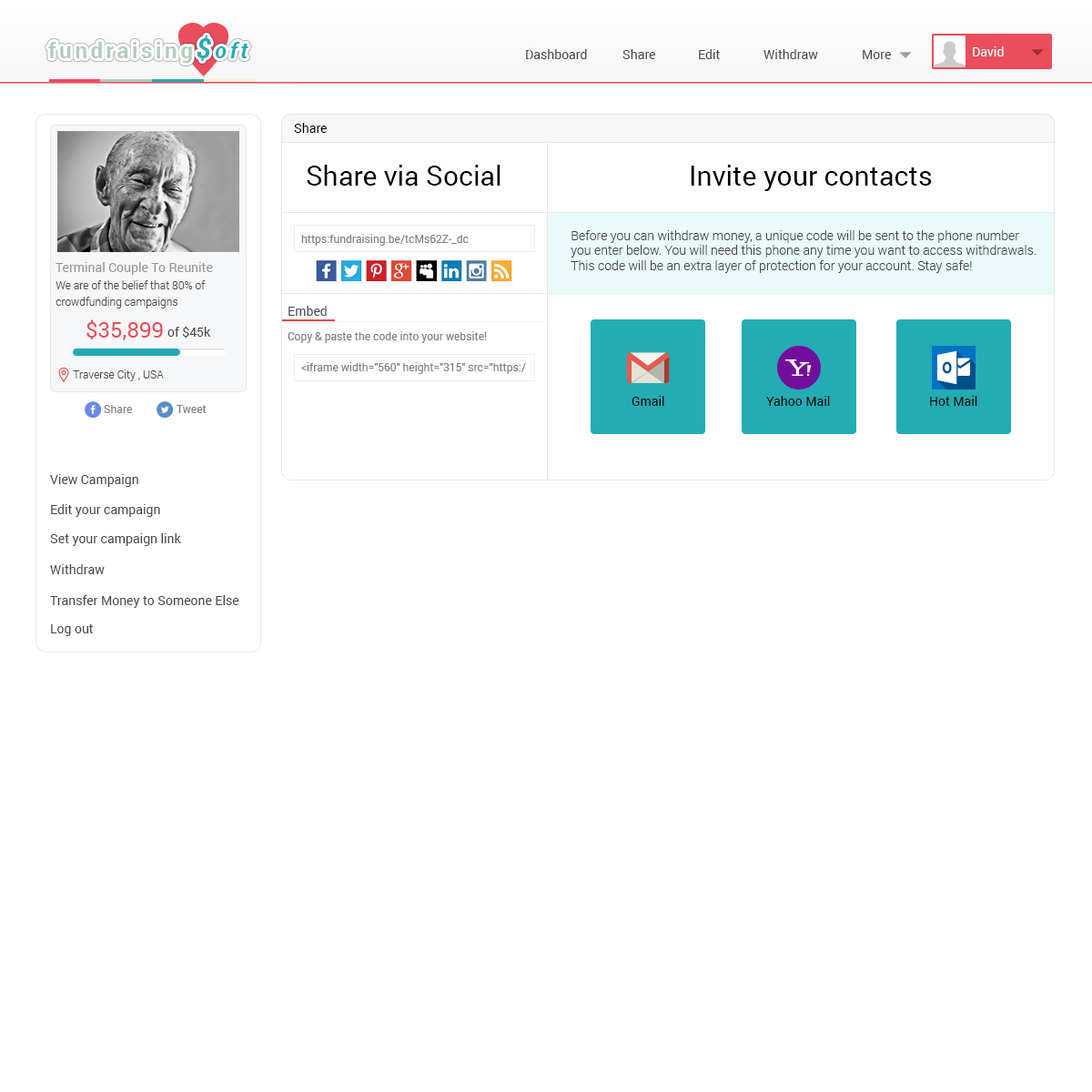
<style>
.page{position:relative;width:1092px;height:1092px;background:#ffffff}
.page>*{position:absolute;margin:0}
.t1{font:21.8px "Roboto-Bold";letter-spacing:0.15em;color:#b2ccba}
.t2{font:27.3px "Roboto-BoldItalic";letter-spacing:0.15em;color:#23acb4}
.t3{font:21.8px "Roboto-BoldItalic";letter-spacing:0.15em;color:#23acb4}
.t4{font:12.7px "Roboto-Regular";color:#464646}
.t5{font:12.7px "Roboto-Regular";color:#ffffff}
.t6{font:12.7px "Roboto-Regular";color:#000000}
.t7{font:27.3px "Roboto-Regular";color:#000000}
.t8{font:10.9px "Roboto-Regular";color:#818181}
.t9{font:12.7px "Roboto-Light";color:#464646}
.t10{font:12.7px "Roboto-Regular";color:#959595}
.t11{font:10.9px/16.4px "Roboto-Light";color:#464646}
.t12{font:21.8px "Roboto-Regular";color:#ea4d5b}
.t13{font:10.9px "Roboto-Light";color:#464646}
</style>
<div class="page">
<p class="t1" style="left:48px;top:35px;width:200px;height:28px">fundraising<span class="t2">$</span><span class="t3">oft</span></p>
<p class="t4" style="left:526px;top:49px;width:61px;height:10px">Dashboard</p>
<p class="t4" style="left:622px;top:49px;width:33px;height:10px">Share</p>
<p class="t4" style="left:699px;top:49px;width:21px;height:10px">Edit</p>
<p class="t4" style="left:763px;top:49px;width:55px;height:10px">Withdraw</p>
<p class="t4" style="left:863px;top:50px;width:28px;height:9px">More</p>
<p class="t5" style="left:973px;top:46px;width:31px;height:10px">David</p>
<p class="t6" style="left:294px;top:123px;width:33px;height:10px">Share</p>
<p class="t7" style="left:307px;top:165px;width:193px;height:21px">Share via Social</p>
<p class="t7" style="left:691px;top:165px;width:241px;height:26px">Invite your contacts</p>
<p class="t8" style="left:301px;top:234px;width:168px;height:12px">https:fundraising.be/tcMs62Z-_dc</p>
<p class="t9" style="left:571px;top:230px;width:465px;height:43px">Before you can withdraw money, a unique code will be sent to the phone number you enter below. You will need this phone any time you want to access withdrawals. This code will be an extra layer of protection for your account. Stay safe!</p>
<p class="t10" style="left:56px;top:262px;width:157px;height:13px">Terminal Couple To Reunite</p>
<p class="t11" style="left:56px;top:280px;width:150px;height:28px">We are of the belief that 80% of crowdfunding campaigns</p>
<p class="t4" style="left:288px;top:306px;width:39px;height:10px">Embed</p>
<p class="t12" style="left:86px;top:319px;width:77px;height:21px">$35,899</p>
<p class="t4" style="left:167px;top:326px;width:44px;height:13px">of $45k</p>
<p class="t8" style="left:288px;top:331px;width:199px;height:12px">Copy &amp; paste the code into your website!</p>
<p class="t8" style="left:301px;top:362px;width:225px;height:12px">&lt;iframe width="560" height="315" src="https:/</p>
<p class="t13" style="left:73px;top:369px;width:91px;height:12px">Traverse City , USA</p>
<p class="t6" style="left:632px;top:396px;width:32px;height:10px">Gmail</p>
<p class="t6" style="left:766px;top:396px;width:64px;height:10px">Yahoo Mail</p>
<p class="t6" style="left:930px;top:396px;width:47px;height:10px">Hot Mail</p>
<p class="t8" style="left:104px;top:405px;width:28px;height:8px">Share</p>
<p class="t8" style="left:177px;top:405px;width:30px;height:8px">Tweet</p>
<p class="t4" style="left:50px;top:474px;width:88px;height:13px">View Campaign</p>
<p class="t4" style="left:51px;top:504px;width:109px;height:13px">Edit your campaign</p>
<p class="t4" style="left:50px;top:533px;width:131px;height:13px">Set your campaign link</p>
<p class="t4" style="left:50px;top:564px;width:55px;height:10px">Withdraw</p>
<p class="t4" style="left:50px;top:595px;width:189px;height:13px">Transfer Money to Someone Else</p>
<p class="t4" style="left:51px;top:624px;width:42px;height:12px">Log out</p>
</div>
